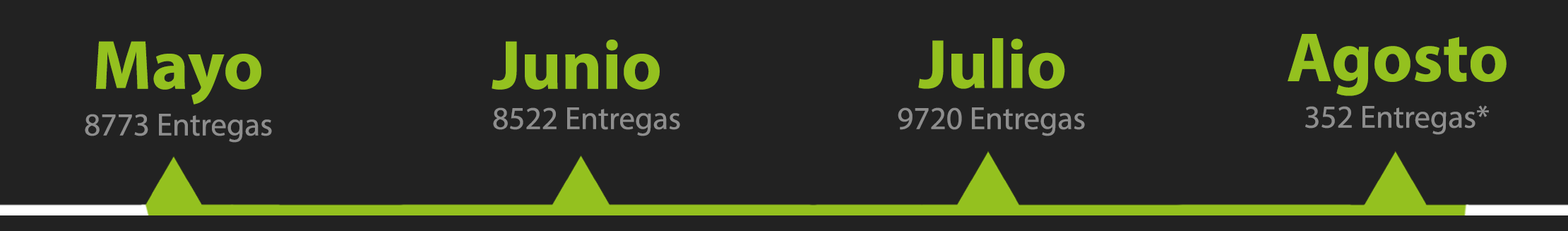
<style>
.page{position:relative;width:1568px;height:231px;background:#222222}
.page>*{position:absolute;margin:0}
.t1{font:69.9px "MyriadPro-Bold";color:#94c11f}
.t2{font:32px "MyriadPro-Regular";color:#8e8e8e}
</style>
<div class="page">
<p class="t1" style="left:95px;top:41px;width:166px;height:64px">Mayo</p>
<p class="t1" style="left:492px;top:40px;width:168px;height:50px">Junio</p>
<p class="t1" style="left:918px;top:38px;width:147px;height:51px">Julio</p>
<p class="t1" style="left:1288px;top:34px;width:219px;height:62px">Agosto</p>
<p class="t2" style="left:85px;top:114px;width:187px;height:29px">8773 Entregas</p>
<p class="t2" style="left:493px;top:107px;width:187px;height:29px">8522 Entregas</p>
<p class="t2" style="left:898px;top:107px;width:187px;height:29px">9720 Entregas</p>
<p class="t2" style="left:1305px;top:105px;width:184px;height:30px">352 Entregas*</p>
</div>
